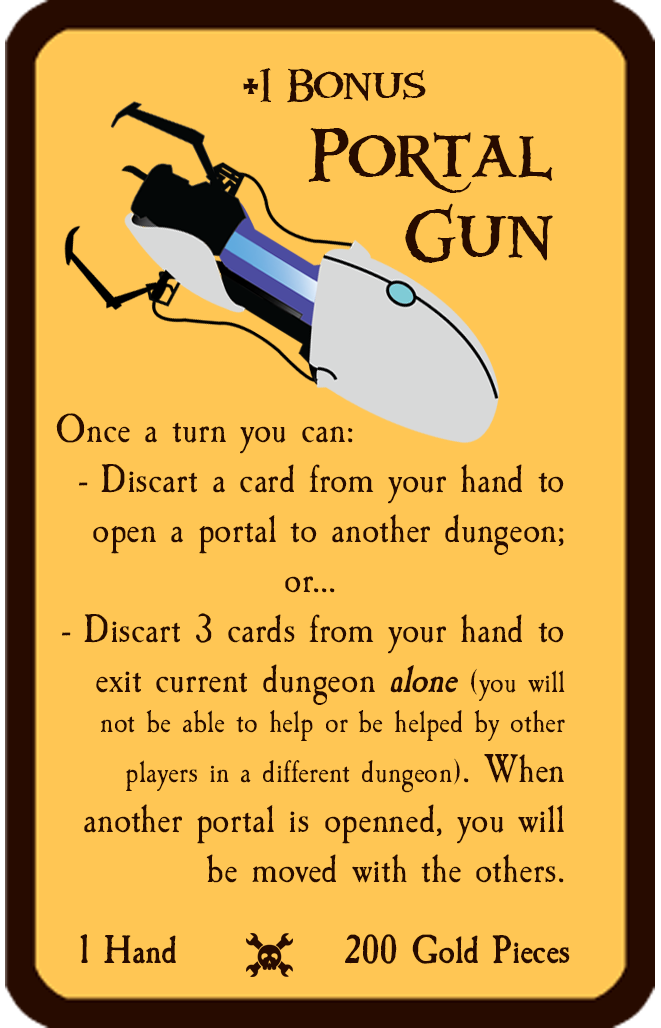
<style>
.page{position:relative;width:661px;height:1028px;background:#ffc654}
.page>*{position:absolute;margin:0}
.t1{font:66.7px "Windlass";color:#270b00}
.t2{font:41.7px "Windlass";color:#270b00}
.t3{font:41.7px "CaslonAntique";color:#270b00}
.t4{font:41.7px "CaslonAntique-BoldItalic";color:#270b00}
.t5{font:33.3px "CaslonAntique";color:#270b00}
.t6{font:41.7px "CaslonAntique-Bold";color:#270b00}
</style>
<div class="page">
<p class="t1" style="left:243px;top:68px;width:310px;height:195px;text-align:center"><span class="t2">+1 Bonus<br></span>Portal <br>Gun</p>
<p class="t3" style="left:56px;top:413px;width:509px;height:470px">Once a turn you can:<br>- Discart a card from your hand to open a portal to another dungeon;<br>or...<br>- Discart 3 cards from your hand to exit current dungeon <span class="t4">alone </span><span class="t5">(you will not be able to help or be helped by other players in a different dungeon)</span>. When another portal is openned, you will be moved with the others.</p>
<p class="t6" style="left:80px;top:934px;width:96px;height:30px">1 Hand</p>
<p class="t6" style="left:345px;top:934px;width:225px;height:30px">200 Gold Pieces</p>
</div>
